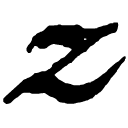
<style>
.page{position:relative;width:128px;height:128px;background:#ffffff}
.page>*{position:absolute;margin:0}
.t1{font:333.3px "TheDreamer-Trial";color:#000000}
</style>
<div class="page">
<p class="t1" style="left:3px;top:22px;width:123px;height:82px">z</p>
</div>
